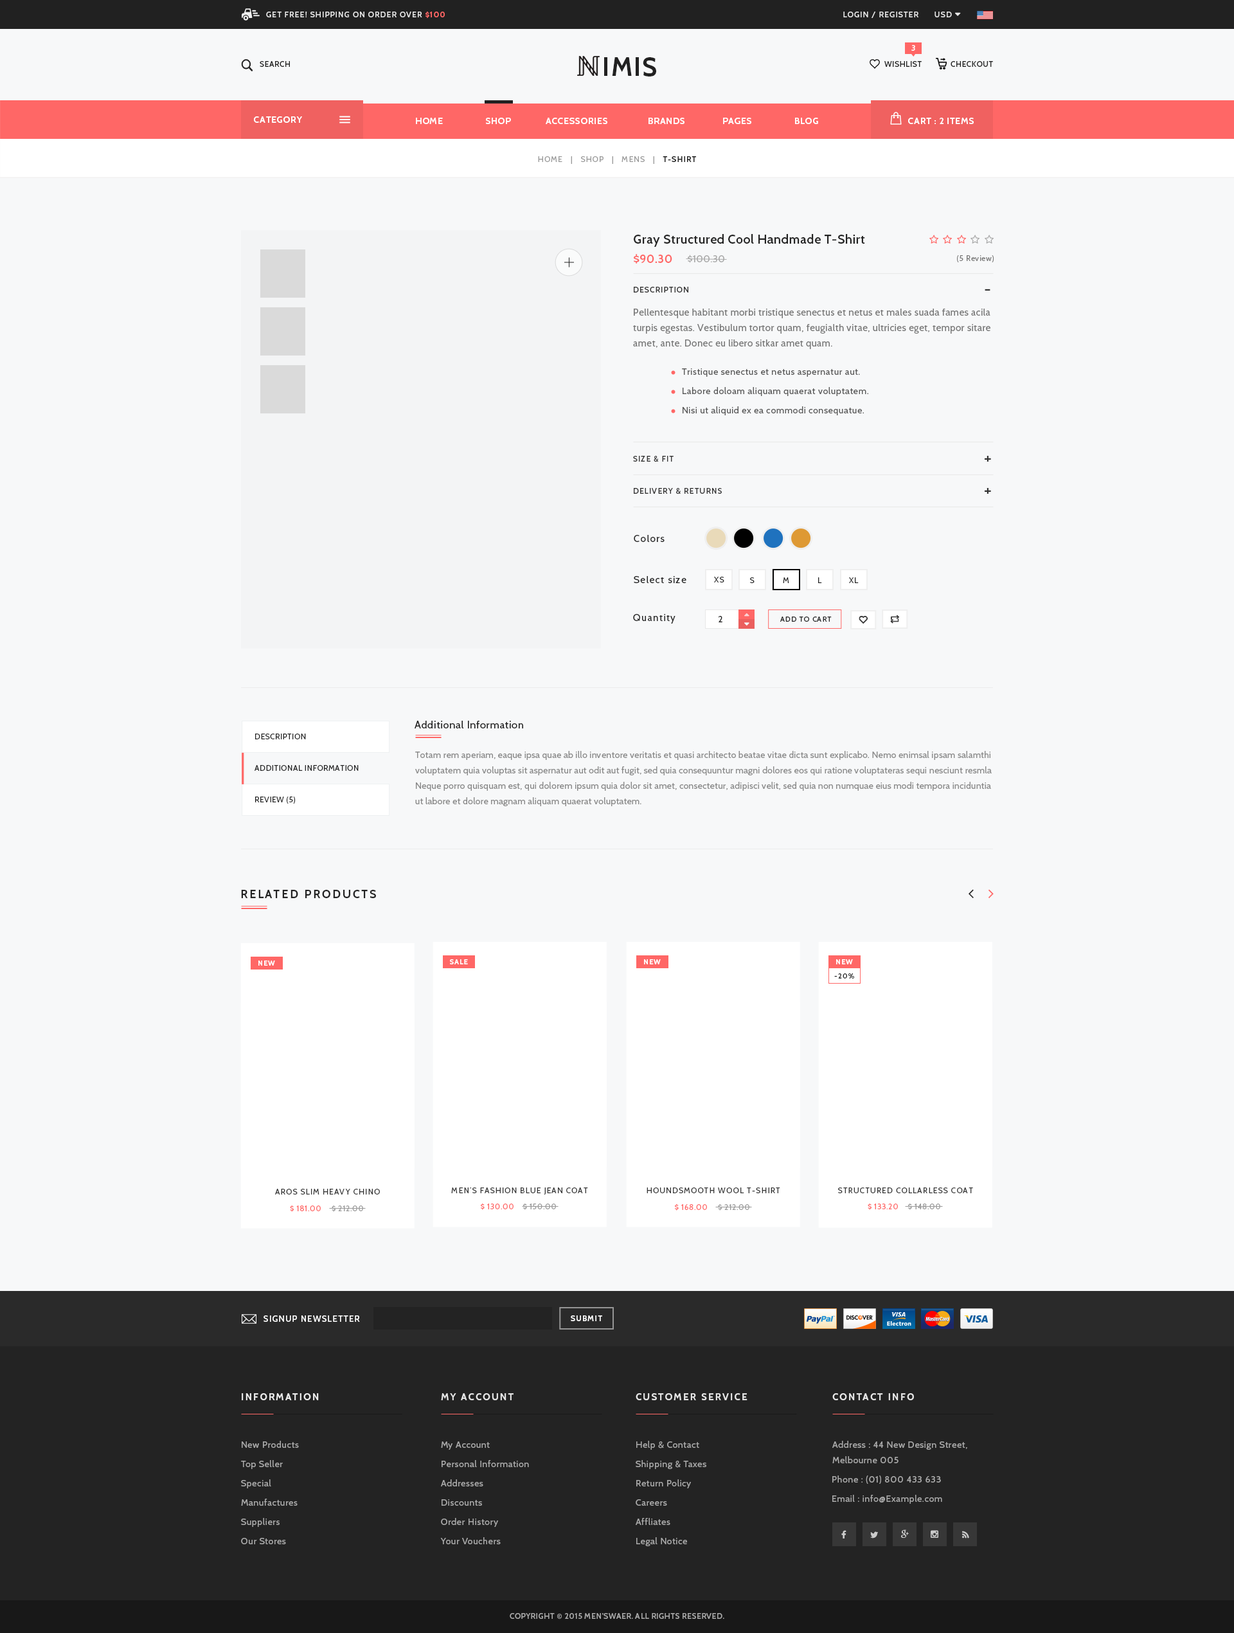
<style>
.page{position:relative;width:1234px;height:1633px;background:#f7f8f9}
.page>*{position:absolute;margin:0}
.t1{font:7.7px "Cabin-Medium";letter-spacing:0.1em;color:#e8e8e8;text-transform:uppercase}
.t2{font:7.7px "Cabin-Bold";letter-spacing:0.1em;color:#ff6766;text-transform:uppercase}
.t3{font:7.7px "Cabin-SemiBold";letter-spacing:0.05em;color:#ffffff;text-transform:uppercase}
.t4{font:7.7px "Cabin-Medium";letter-spacing:0.05em;color:#212121;text-transform:uppercase}
.t5{font:25.7px "Cabin-Bold";letter-spacing:0.05em;color:#212121;text-transform:uppercase}
.t6{font:9px "Cabin-Bold";letter-spacing:0.05em;color:#ffffff;text-transform:uppercase}
.t7{font:7.7px "Cabin-Regular";letter-spacing:0.1em;color:#999999;text-transform:uppercase}
.t8{font:7.7px "Cabin-Medium";letter-spacing:0.1em;color:#999999;text-transform:uppercase}
.t9{font:7.7px "Cabin-SemiBold";letter-spacing:0.1em;color:#212121;text-transform:uppercase}
.t10{font:12.9px "Cabin-SemiBold";letter-spacing:0.02em;color:#232323}
.t11{font:11.6px "Cabin-Bold";letter-spacing:0.02em;color:#ff6766;text-transform:uppercase}
.t12{font:9.6px "Cabin-Regular";letter-spacing:0.02em;color:#aaaaaa;text-transform:uppercase}
.t13{font:7.7px "Cabin-Regular";letter-spacing:0.05em;color:#777777}
.t14{font:7.7px "Cabin-Medium";letter-spacing:0.1em;color:#333333;text-transform:uppercase}
.t15{font:16.7px "Cabin-Medium";letter-spacing:0.1em;color:#333333;text-transform:uppercase}
.t16{font:9.6px/15.4px "Cabin-Regular";letter-spacing:0.03em;color:#777777}
.t17{font:9px "Cabin-Regular";letter-spacing:0.05em;color:#555555}
.t18{font:9.6px "Cabin-Regular";letter-spacing:0.1em;color:#232323}
.t19{font:7.7px "Cabin-Regular";letter-spacing:0.05em;color:#232323}
.t20{font:9px "Cabin-Regular";letter-spacing:0.05em;color:#232323}
.t21{font:7.1px "Cabin-Regular";letter-spacing:0.1em;color:#232323;text-transform:uppercase}
.t22{font:10.3px "Cabin-Regular";letter-spacing:0.05em;color:#212121}
.t23{font:7.7px "Cabin-Regular";letter-spacing:0.05em;color:#232323;text-transform:uppercase}
.t24{font:9px/15.4px "Cabin-Regular";letter-spacing:0.02em;color:#888888}
.t25{font:11.6px "Cabin-Bold";letter-spacing:0.15em;color:#232323;text-transform:uppercase}
.t26{font:7.1px "Cabin-Bold";letter-spacing:0.1em;color:#ffffff;text-transform:uppercase}
.t27{font:7.1px "Cabin-SemiBold";letter-spacing:0.1em;color:#232323}
.t28{font:7.7px "Cabin-Regular";letter-spacing:0.1em;color:#333333;text-transform:uppercase}
.t29{font:7.7px "Cabin-Regular";letter-spacing:0.05em;color:#ff6766}
.t30{font:7.7px "Cabin-Regular";letter-spacing:0.05em;color:#999999}
.t31{font:8.4px "Cabin-Medium";letter-spacing:0.1em;color:#ffffff;text-transform:uppercase}
.t32{font:7.7px "Cabin-SemiBold";letter-spacing:0.1em;color:#ffffff;text-transform:uppercase}
.t33{font:9.6px "Cabin-Bold";letter-spacing:0.15em;color:#eeeeee;text-transform:uppercase}
.t34{font:9.6px "Cabin-Bold";letter-spacing:0.15em;color:#e8e8e8;text-transform:uppercase}
.t35{font:9px "Cabin-Regular";letter-spacing:0.05em;color:#aaaaaa}
.t36{font:9px/15.4px "Cabin-Regular";letter-spacing:0.05em;color:#aaaaaa}
.t37{font:7.7px "Cabin-Medium";letter-spacing:0.05em;color:#aaaaaa;text-transform:uppercase}
</style>
<div class="page">
<p class="t1" style="left:266px;top:12px;width:179px;height:6px">get free! shipping on order over <span class="t2">$100</span></p>
<p class="t1" style="left:843px;top:12px;width:76px;height:6px">login / register</p>
<p class="t3" style="left:912px;top:45px;width:3px;height:6px">3</p>
<p class="t4" style="left:260px;top:61px;width:30px;height:6px">search</p>
<p class="t5" style="left:604px;top:57px;width:52px;height:19px">imis</p>
<p class="t4" style="left:885px;top:61px;width:37px;height:6px">wishlist</p>
<p class="t4" style="left:951px;top:61px;width:42px;height:6px">checkout</p>
<p class="t6" style="left:254px;top:116px;width:48px;height:7px">category</p>
<p class="t6" style="left:416px;top:118px;width:402px;height:6px">home                 shop              accessories                brands               pages                 Blog</p>
<p class="t6" style="left:908px;top:118px;width:66px;height:6px">cart : 2 items</p>
<p class="t7" style="left:538px;top:156px;width:158px;height:8px">home   |   Shop   |   mens<span class="t8">   |   </span><span class="t9">T-shirt</span></p>
<p class="t10" style="left:634px;top:234px;width:231px;height:13px">Gray Structured Cool Handmade T-Shirt</p>
<p class="t11" style="left:634px;top:254px;width:38px;height:10px">$90.30</p>
<p class="t12" style="left:688px;top:255px;width:36px;height:8px">$100.30</p>
<p class="t13" style="left:957px;top:255px;width:38px;height:7px">(5 Review)</p>
<p class="t14" style="left:634px;top:287px;width:54px;height:5px">Description</p>
<p class="t15" style="left:985px;top:289px;width:6px;height:2px">-</p>
<p class="t16" style="left:633px;top:309px;width:358px;height:40px">Pellentesque habitant morbi tristique senectus et netus et males suada fames acila turpis egestas. Vestibulum tortor quam, feugialth vitae, ultricies eget, tempor sitare amet, ante. Donec eu libero sitkar amet quam.</p>
<p class="t17" style="left:682px;top:368px;width:178px;height:9px">Tristique senectus et netus aspernatur aut.</p>
<p class="t17" style="left:683px;top:387px;width:186px;height:9px">Labore doloam aliquam quaerat voluptatem.</p>
<p class="t17" style="left:683px;top:406px;width:181px;height:9px">Nisi ut aliquid ex ea commodi consequatue.</p>
<p class="t14" style="left:633px;top:456px;width:41px;height:6px">size &amp; fit</p>
<p class="t15" style="left:985px;top:456px;width:6px;height:6px">+</p>
<p class="t14" style="left:634px;top:488px;width:88px;height:6px">delivery &amp; returns</p>
<p class="t15" style="left:985px;top:488px;width:6px;height:6px">+</p>
<p class="t18" style="left:634px;top:535px;width:31px;height:7px">Colors</p>
<p class="t18" style="left:634px;top:576px;width:53px;height:7px">Select size</p>
<p class="t19" style="left:714px;top:577px;width:10px;height:5px">XS</p>
<p class="t19" style="left:750px;top:577px;width:5px;height:6px">S</p>
<p class="t19" style="left:783px;top:577px;width:6px;height:6px">M</p>
<p class="t19" style="left:818px;top:577px;width:4px;height:6px">L</p>
<p class="t19" style="left:849px;top:577px;width:10px;height:6px">XL</p>
<p class="t18" style="left:633px;top:614px;width:43px;height:10px">Quantity</p>
<p class="t20" style="left:718px;top:616px;width:5px;height:6px">2</p>
<p class="t21" style="left:780px;top:616px;width:52px;height:6px">Add to cart</p>
<p class="t22" style="left:415px;top:721px;width:108px;height:7px">Additional Information</p>
<p class="t23" style="left:255px;top:734px;width:51px;height:5px">Description</p>
<p class="t24" style="left:415px;top:751px;width:577px;height:55px">Totam rem aperiam, eaque ipsa quae ab illo inventore veritatis et quasi architecto beatae vitae dicta sunt explicabo. Nemo enimsal ipsam salamthi voluptatem quia voluptas sit aspernatur aut odit aut fugit, sed quia consequuntur magni dolores eos qui ratione voluptateras sequi nesciunt resmla Neque porro quisquam est, qui dolorem ipsum quia dolor sit amet, consectetur, adipisci velit, sed quia non numquae eius modi tempora inciduntia ut labore et dolore magnam aliquam quaerat voluptatem. <br>Ut enim ad minima veniam, quis nostrum exercitationem ullam corporis suscipit laboriosam.</p>
<p class="t19" style="left:255px;top:765px;width:104px;height:6px">ADDITIONAL INFORMATION</p>
<p class="t23" style="left:255px;top:797px;width:41px;height:7px">Review (5)</p>
<p class="t25" style="left:241px;top:890px;width:135px;height:8px">related products</p>
<p class="t26" style="left:258px;top:960px;width:17px;height:6px">new</p>
<p class="t26" style="left:450px;top:959px;width:18px;height:5px">sale</p>
<p class="t26" style="left:644px;top:959px;width:17px;height:5px">new</p>
<p class="t26" style="left:836px;top:959px;width:17px;height:5px">new</p>
<p class="t27" style="left:834px;top:973px;width:20px;height:5px">-20%</p>
<p class="t28" style="left:275px;top:1189px;width:105px;height:5px">AROS SLIM HEAVY CHINO</p>
<p class="t28" style="left:451px;top:1187px;width:137px;height:7px">men’s fashion blue jean coat</p>
<p class="t28" style="left:647px;top:1187px;width:133px;height:6px">houndsmooth wool t-shirt</p>
<p class="t28" style="left:838px;top:1187px;width:135px;height:6px">structured collarless coat</p>
<p class="t29" style="left:290px;top:1205px;width:31px;height:7px">$ 181.00</p>
<p class="t30" style="left:332px;top:1205px;width:31px;height:7px">$ 212.00</p>
<p class="t29" style="left:481px;top:1203px;width:33px;height:7px">$ 130.00</p>
<p class="t30" style="left:523px;top:1203px;width:33px;height:7px">$ 150.00</p>
<p class="t29" style="left:675px;top:1204px;width:32px;height:6px">$ 168.00</p>
<p class="t30" style="left:718px;top:1204px;width:32px;height:6px">$ 212.00</p>
<p class="t29" style="left:868px;top:1203px;width:30px;height:7px">$ 133.20</p>
<p class="t30" style="left:908px;top:1203px;width:33px;height:7px">$ 148.00</p>
<p class="t31" style="left:264px;top:1315px;width:96px;height:7px">signup newsletter</p>
<p class="t32" style="left:571px;top:1315px;width:31px;height:6px">Submit</p>
<p class="t33" style="left:242px;top:1393px;width:77px;height:7px">information</p>
<p class="t34" style="left:441px;top:1393px;width:73px;height:7px">my account</p>
<p class="t34" style="left:636px;top:1393px;width:112px;height:7px">customer service</p>
<p class="t34" style="left:833px;top:1393px;width:81px;height:7px">contact Info</p>
<p class="t35" style="left:242px;top:1441px;width:57px;height:7px">New Products</p>
<p class="t35" style="left:441px;top:1441px;width:49px;height:9px">My Account</p>
<p class="t35" style="left:636px;top:1441px;width:63px;height:9px">Help &amp; Contact</p>
<p class="t36" style="left:833px;top:1441px;width:135px;height:22px">Address : 44 New Design Street,<br>Melbourne 005</p>
<p class="t35" style="left:241px;top:1460px;width:42px;height:9px">Top Seller</p>
<p class="t35" style="left:442px;top:1460px;width:87px;height:7px">Personal Information</p>
<p class="t35" style="left:636px;top:1460px;width:70px;height:9px">Shipping &amp; Taxes</p>
<p class="t35" style="left:241px;top:1479px;width:30px;height:9px">Special</p>
<p class="t35" style="left:441px;top:1479px;width:42px;height:7px">Addresses</p>
<p class="t35" style="left:636px;top:1479px;width:55px;height:9px">Return Policy</p>
<p class="t35" style="left:833px;top:1475px;width:108px;height:9px">Phone : (01) 800 433 633</p>
<p class="t35" style="left:241px;top:1498px;width:57px;height:8px">Manufactures</p>
<p class="t35" style="left:442px;top:1499px;width:40px;height:7px">Discounts</p>
<p class="t35" style="left:636px;top:1499px;width:31px;height:7px">Careers</p>
<p class="t35" style="left:833px;top:1495px;width:109px;height:9px">Email : info@Example.com</p>
<p class="t35" style="left:241px;top:1518px;width:39px;height:9px">Suppliers</p>
<p class="t35" style="left:441px;top:1518px;width:57px;height:9px">Order History</p>
<p class="t35" style="left:636px;top:1518px;width:34px;height:7px">Affliates</p>
<p class="t35" style="left:241px;top:1538px;width:45px;height:6px">Our Stores</p>
<p class="t35" style="left:440px;top:1537px;width:61px;height:7px">Your Vouchers</p>
<p class="t35" style="left:636px;top:1537px;width:51px;height:9px">Legal Notice</p>
<p class="t37" style="left:510px;top:1613px;width:214px;height:6px">Copyright © 2015 Men’swaer. All Rights Reserved.</p>
</div>
